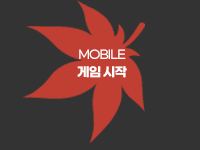
<style>
.page{position:relative;width:200px;height:150px;background:#333333}
.page>*{position:absolute;margin:0}
.t1{font:12px/18px "GmarketSansTTFMedium";letter-spacing:-0.075em;color:#ffffff}
.t2{font:13px/18px "GmarketSansTTFBold";letter-spacing:-0.075em;color:#ffffff}
</style>
<div class="page">
<p class="t1" style="left:77px;top:49px;width:50px;height:29px;text-align:center">MOBILE<br><span class="t2">게임 시작</span></p>
</div>
